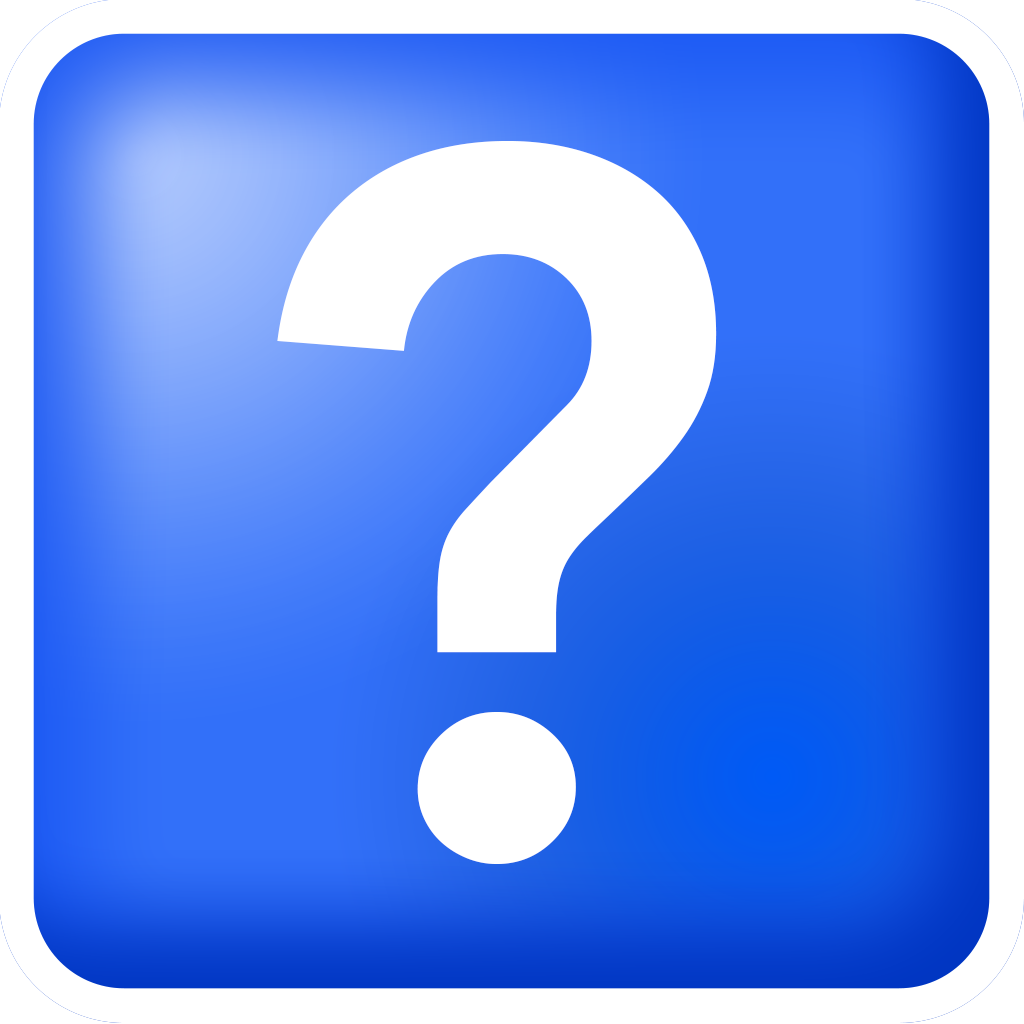
<style>
.page{position:relative;width:1024px;height:1024px;background:#ffffff}
.page>*{position:absolute;margin:0}
.t1{font:987.5px "Avenir-Heavy";letter-spacing:-0.025em;color:#ffffff}
</style>
<div class="page">
<p class="t1" style="left:277px;top:141px;width:440px;height:723px">?</p>
</div>
